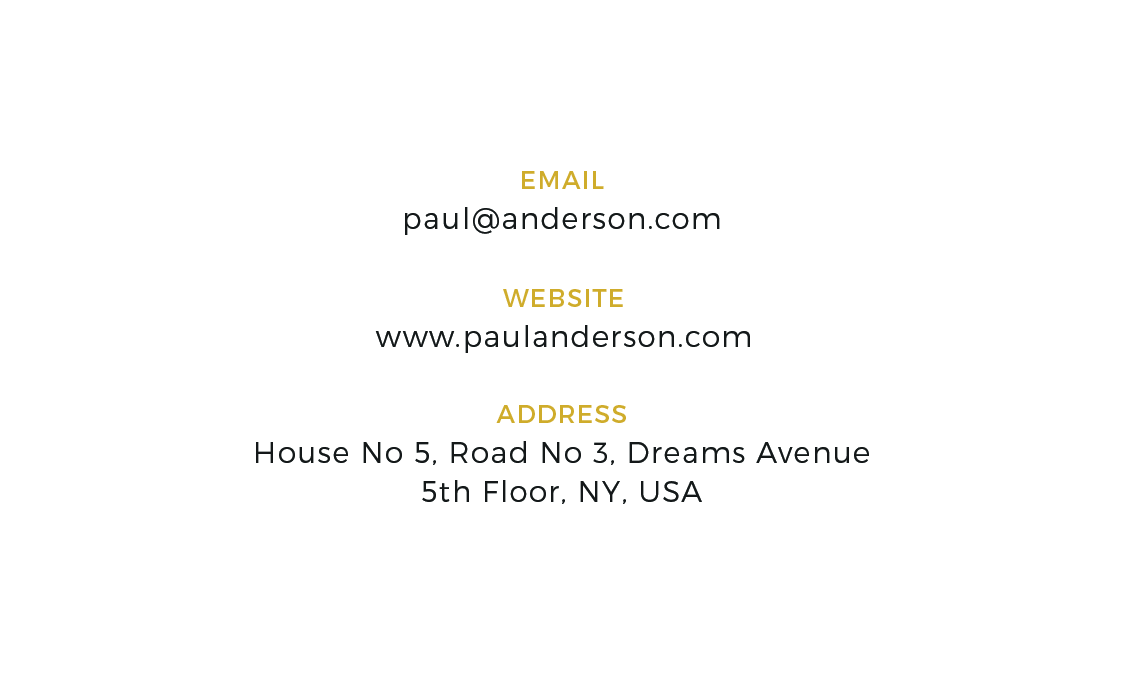
<style>
.page{position:relative;width:1125px;height:675px;background:#ffffff}
.page>*{position:absolute;margin:0}
.t1{font:29.2px "Montserrat-Light";letter-spacing:0.05em;color:#141819}
.t2{font:25px "Montserrat-Regular";letter-spacing:0.05em;color:#cfac2b}
</style>
<div class="page">
<p class="t1" style="left:405px;top:171px;width:315px;height:64px;text-align:center"><span class="t2">EMAIL<br></span>paul@anderson.com</p>
<p class="t1" style="left:375px;top:289px;width:375px;height:64px;text-align:center"><span class="t2">WEBSITE<br></span>www.paulanderson.com</p>
<p class="t1" style="left:256px;top:405px;width:613px;height:99px;text-align:center"><span class="t2">ADDRESS<br></span>House No 5, Road No 3, Dreams Avenue<br>5th Floor, NY, USA</p>
</div>
